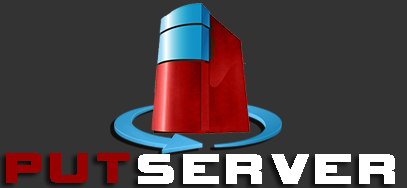
<style>
.page{position:relative;width:407px;height:188px;background:#333333}
.page>*{position:absolute;margin:0}
.t1{font:60px "Vipnagorgialla";letter-spacing:0.1em;color:#990000}
.t2{font:60px "Vipnagorgialla";letter-spacing:0.1em;color:#ffffff}
</style>
<div class="page">
<p class="t1" style="left:6px;top:153px;width:124px;height:30px">PUT</p>
<p class="t2" style="left:138px;top:154px;width:257px;height:30px">SERVER</p>
</div>
